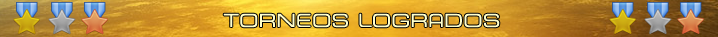
<style>
.page{position:relative;width:718px;height:37px}
.page>*{position:absolute;margin:0}
.t1{font:18px "ESL-eSport-Ext-Light";color:#ffffcc}
</style>
<div class="page">
<p class="t1" style="left:223px;top:13px;width:277px;height:15px">TORNEOS LOGRADOS</p>
</div>
